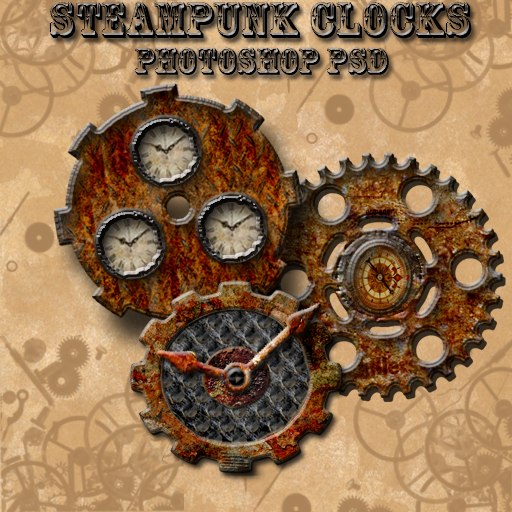
<style>
.page{position:relative;width:512px;height:512px}
.page>*{position:absolute;margin:0}
.t1{font:47.8px "RosewoodStd-Regular"}
.t2{font:35.9px "RosewoodStd-Regular"}
</style>
<div class="page">
<p class="t1" style="left:50px;top:1px;width:422px;height:38px">sTEAMPUNK CLOCKS</p>
<p class="t2" style="left:135px;top:47px;width:254px;height:28px">PHOTOSHOP PSD</p>
</div>
